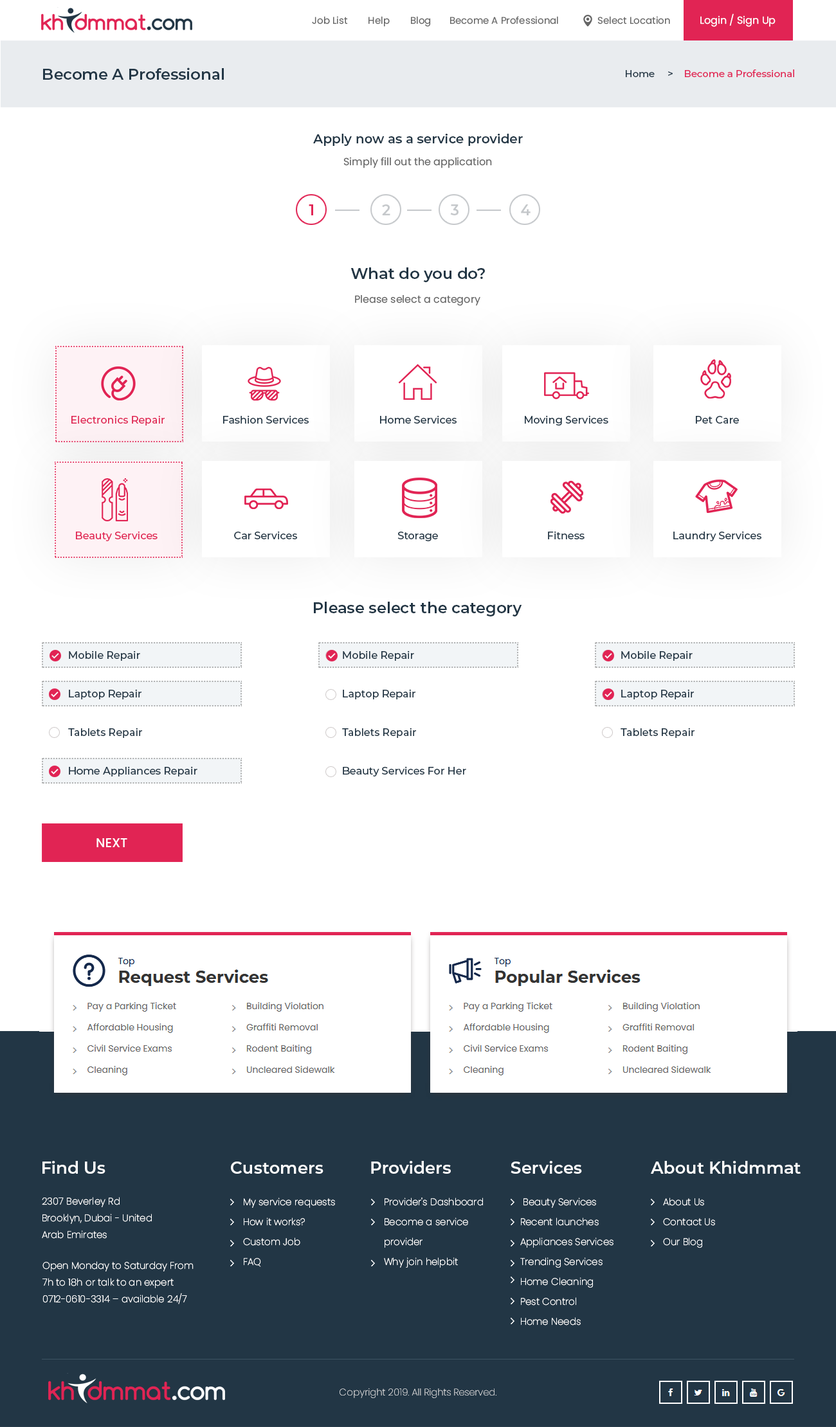
<style>
.page{position:relative;width:836px;height:1427px;background:#ffffff}
.page>*{position:absolute;margin:0}
.t1{font:9.6px "Poppins-Regular";color:#666666}
.t2{font:9px "Poppins-Regular";color:#666666}
.t3{font:10.3px "Poppins-Regular";color:#ffffff}
.t4{font:15.4px "Montserrat-SemiBold";color:#223645}
.t5{font:9.6px "Montserrat-Medium";color:#e12454}
.t6{font:9.6px "Montserrat-Medium";color:#05315e}
.t7{font:9.6px "Montserrat-Medium";color:#223645}
.t8{font:12.9px "Montserrat-SemiBold";color:#213544}
.t9{font:10.3px "Poppins-Regular";color:#666666}
.t10{font:14.8px "Montserrat-SemiBold";color:#e12454}
.t11{font:14.8px "Montserrat-SemiBold";color:#c5c8cb}
.t12{font:15.4px "Montserrat-SemiBold";color:#213544}
.t13{font:10.3px "Montserrat-Medium";color:#e12454}
.t14{font:10.3px "Montserrat-Medium";color:#223645}
.t15{font:10.3px/19.3px "Montserrat-Medium";color:#213544}
.t16{font:12.9px "Poppins-Medium";color:#ffffff}
.t17{font:16.7px "Montserrat-SemiBold";color:#ffffff}
.t18{font:9.6px/16.7px "Poppins-ExtraLight";color:#ffffff}
.t19{font:9.6px/19.9px "Poppins-ExtraLight";color:#ffffff}
.t20{font:9.6px "Poppins-ExtraLight"}
</style>
<div class="page">
<p class="t1" style="left:312px;top:13px;width:463px;height:14px"><span class="t2">       </span> Job List        Help        Blog       Become A Professional               Select Location            <span class="t3">Login / Sign Up</span></p>
<p class="t4" style="left:43px;top:67px;width:181px;height:13px">Become A Professional</p>
<p class="t5" style="left:625px;top:69px;width:169px;height:8px"><span class="t6">    </span><span class="t7">Home     &gt;    </span>Become a Professional</p>
<p class="t8" style="left:313px;top:134px;width:210px;height:12px">Apply now as a service provider</p>
<p class="t9" style="left:343px;top:157px;width:149px;height:11px">Simply fill out the application</p>
<p class="t10" style="left:309px;top:204px;width:4px;height:11px">1</p>
<p class="t11" style="left:382px;top:204px;width:8px;height:11px">2</p>
<p class="t11" style="left:450px;top:204px;width:8px;height:11px">3</p>
<p class="t11" style="left:521px;top:204px;width:9px;height:11px">4</p>
<p class="t12" style="left:350px;top:267px;width:135px;height:15px">What do you do?</p>
<p class="t9" style="left:355px;top:295px;width:125px;height:11px">Please select a category</p>
<p class="t13" style="left:71px;top:415px;width:94px;height:11px">Electronics Repair</p>
<p class="t14" style="left:223px;top:415px;width:86px;height:9px">Fashion Services</p>
<p class="t14" style="left:380px;top:415px;width:76px;height:9px">Home Services</p>
<p class="t14" style="left:525px;top:415px;width:83px;height:11px">Moving Services</p>
<p class="t14" style="left:695px;top:416px;width:44px;height:8px">Pet Care</p>
<p class="t13" style="left:76px;top:531px;width:81px;height:10px">Beauty Services</p>
<p class="t14" style="left:234px;top:531px;width:63px;height:8px">Car Services</p>
<p class="t14" style="left:397px;top:532px;width:41px;height:9px">Storage</p>
<p class="t14" style="left:548px;top:531px;width:36px;height:8px">Fitness</p>
<p class="t14" style="left:673px;top:531px;width:88px;height:10px">Laundry Services</p>
<p class="t12" style="left:314px;top:602px;width:208px;height:14px">Please select the category</p>
<p class="t15" style="left:68px;top:651px;width:129px;height:125px">Mobile Repair<br><br>Laptop Repair<br><br>Tablets Repair<br><br>Home Appliances Repair</p>
<p class="t15" style="left:342px;top:651px;width:124px;height:125px">Mobile Repair<br><br>Laptop Repair<br><br>Tablets Repair<br><br>Beauty Services For Her</p>
<p class="t15" style="left:620px;top:651px;width:74px;height:87px">Mobile Repair<br><br>Laptop Repair<br><br>Tablets Repair</p>
<p class="t16" style="left:96px;top:838px;width:31px;height:9px">NEXT</p>
<p class="t17" style="left:42px;top:1161px;width:63px;height:13px">Find Us</p>
<p class="t17" style="left:231px;top:1162px;width:92px;height:12px">Customers</p>
<p class="t17" style="left:371px;top:1161px;width:80px;height:13px">Providers</p>
<p class="t17" style="left:510px;top:1161px;width:72px;height:13px">Services</p>
<p class="t17" style="left:651px;top:1161px;width:149px;height:13px">About Khidmmat</p>
<p class="t18" style="left:42px;top:1197px;width:110px;height:42px">2307 Beverley Rd<br>Brooklyn, Dubai - United Arab Emirates</p>
<p class="t19" style="left:243px;top:1198px;width:92px;height:69px">My service requests<br>    How it works?<br>    Custom Job<br>    FAQ</p>
<p class="t19" style="left:384px;top:1198px;width:99px;height:70px">Provider's Dashboard<br>    Become a service <br>    provider<br>    Why join helpbit</p>
<p class="t19" style="left:520px;top:1198px;width:93px;height:127px">Beauty Services <br>Recent launches <br>Appliances Services Trending Services <br>Home Cleaning <br>Pest Control <br>Home Needs</p>
<p class="t19" style="left:663px;top:1198px;width:52px;height:50px">About Us<br> Contact Us<br> Our Blog</p>
<p class="t18" style="left:42px;top:1261px;width:151px;height:43px">Open Monday to Saturday From 7h to 18h or talk to an expert 0712-0610-3314 – available 24/7</p>
<p class="t20" style="left:339px;top:1388px;width:157px;height:10px">Copyright 2019. All Rights Reserved.</p>
</div>
